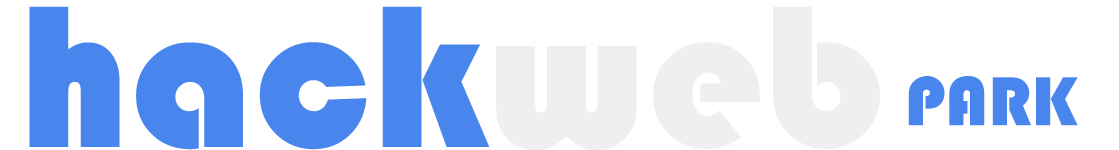
<style>
.page{position:relative;width:1119px;height:150px;background:#ffffff}
.page>*{position:absolute;margin:0}
.t1{font:210px "Bauhaus93";color:#4885ed}
.t2{font:210px "Bauhaus93";color:#efefef}
.t3{font:72px "Bauhaus93";color:#4885ed}
</style>
<div class="page">
<p class="t1" style="left:29px;top:6px;width:851px;height:145px">hack<span class="t2">web</span></p>
<p class="t3" style="left:908px;top:76px;width:170px;height:50px">PARK</p>
</div>
